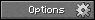
<style>
.page{position:relative;width:95px;height:20px;background:#6f6f6f}
.page>*{position:absolute;margin:0}
.t1{font:8px "Minecraft";color:#ffffff}
</style>
<div class="page">
<p class="t1" style="left:29px;top:6px;width:35px;height:8px">Options</p>
</div>
